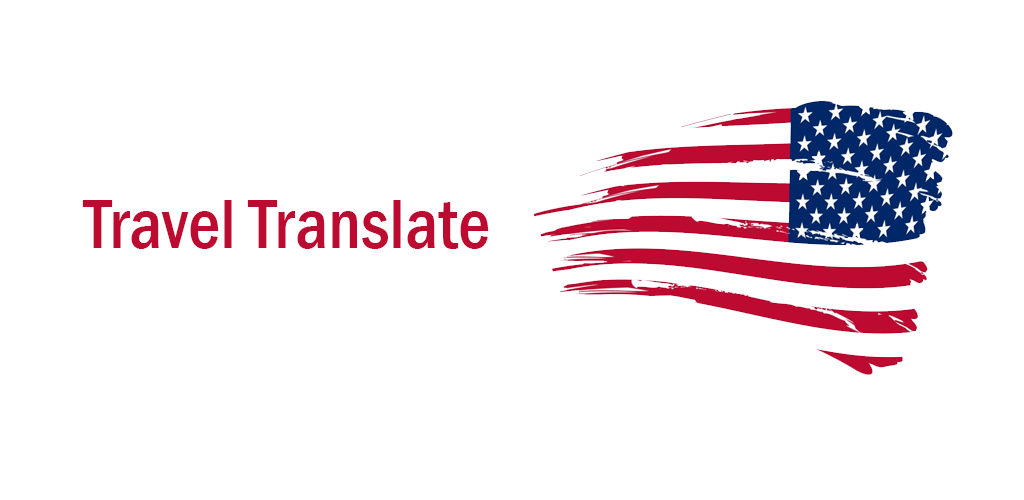
<style>
.page{position:relative;width:1024px;height:500px;background:#ffffff}
.page>*{position:absolute;margin:0}
.t1{font:72px "FranklinGothic-MediumCond";color:#bd0a30}
</style>
<div class="page">
<p class="t1" style="left:82px;top:200px;width:407px;height:49px">Travel Translate</p>
</div>
